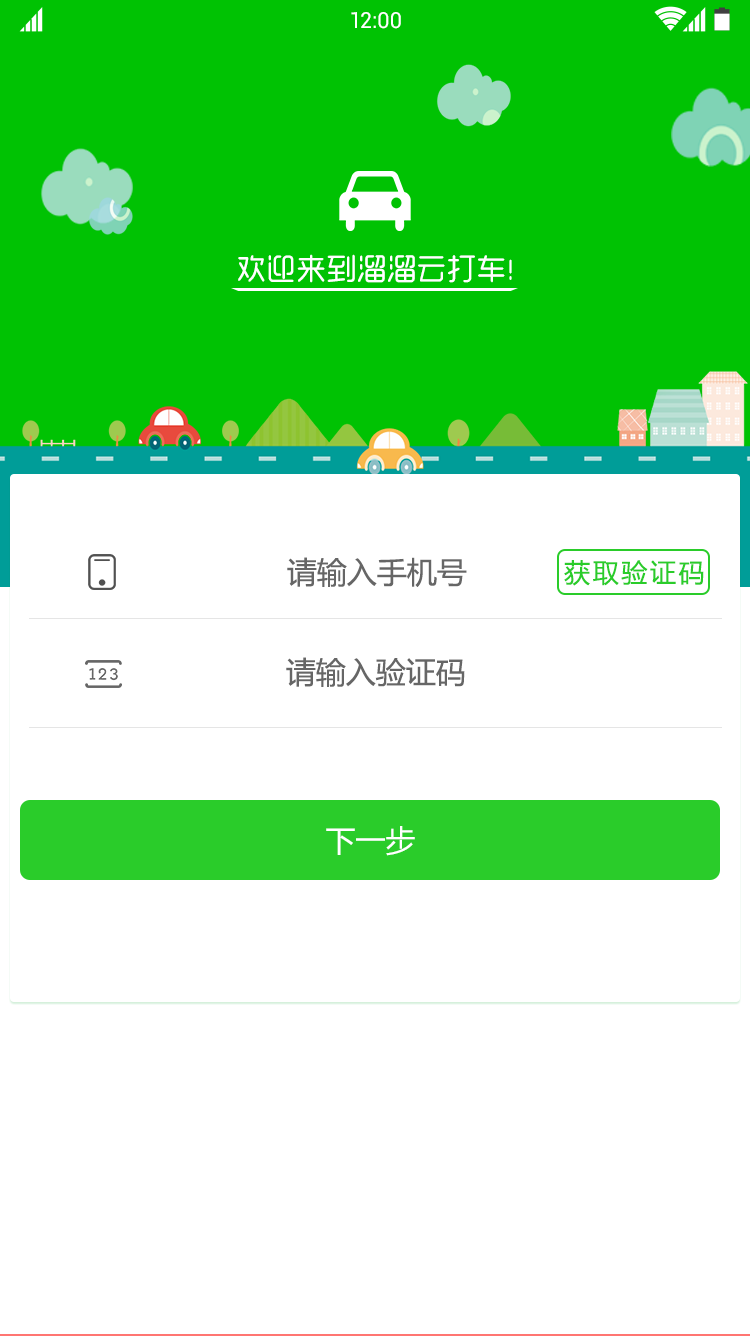
<style>
.page{position:relative;width:750px;height:1336px;background:#ffffff}
.page>*{position:absolute;margin:0}
.t1{font:22px "Roboto-Regular";color:#ffffff}
.t2{font:30px "MFYueYuan_Noncommercial-Regular";color:#ffffff;text-transform:uppercase}
.t3{font:30px "MicrosoftYaHei";color:#666666;text-transform:uppercase}
.t4{font:26px "MicrosoftYaHei";letter-spacing:0.1em;color:#2acc2a;text-transform:uppercase}
.t5{font:30px "MicrosoftYaHei";color:#ffffff}
</style>
<div class="page">
<p class="t1" style="left:351px;top:12px;width:50px;height:17px">12:00</p>
<p class="t2" style="left:238px;top:254px;width:274px;height:29px">欢迎来到溜溜云打车！</p>
<p class="t3" style="left:287px;top:557px;width:180px;height:30px">请输入手机号</p>
<p class="t4" style="left:564px;top:560px;width:140px;height:26px">获取验证码</p>
<p class="t3" style="left:286px;top:657px;width:179px;height:30px">请输入验证码</p>
<p class="t5" style="left:326px;top:826px;width:89px;height:30px">下一步</p>
</div>
